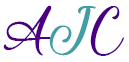
<style>
.page{position:relative;width:129px;height:62px;background:#ffffff}
.page>*{position:absolute;margin:0}
.t1{font:58.3px "Easy-November";letter-spacing:0.05em;color:#4b0082}
.t2{font:58.3px "Easy-November";letter-spacing:0.05em;color:#429ea6}
</style>
<div class="page">
<p class="t1" style="left:3px;top:5px;width:121px;height:51px">A<span class="t2">J</span>C</p>
</div>
